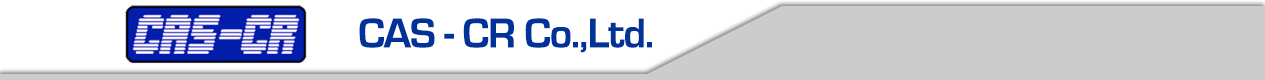
<style>
.page{position:relative;width:1265px;height:80px;background:#cccccc}
.page>*{position:absolute;margin:0}
.t1{font:43px "EurostileBold";letter-spacing:-0.025em;color:#003399}
</style>
<div class="page">
<p class="t1" style="left:359px;top:18px;width:293px;height:35px">CAS - CR Co.,Ltd.</p>
</div>
